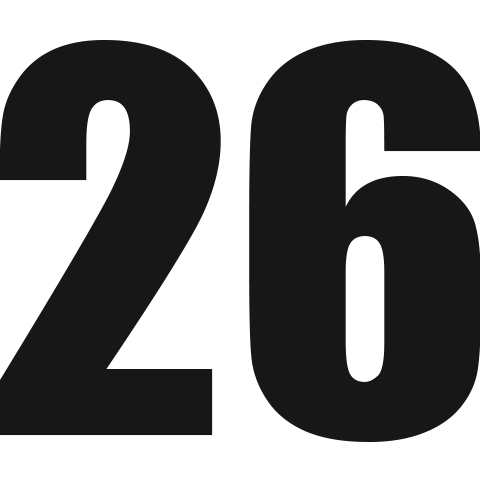
<style>
.page{position:relative;width:480px;height:480px;background:#171717}
.page>*{position:absolute;margin:0}
.t1{font:490.3px "Impact";color:#171717}
</style>
<div class="page">
<p class="t1" style="left:0px;top:40px;width:481px;height:402px">26</p>
</div>
